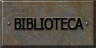
<style>
.page{position:relative;width:96px;height:48px}
.page>*{position:absolute;margin:0}
.t1{font:14.7px "Tahoma";letter-spacing:-0.05em;color:#000000;text-transform:uppercase;font-weight:bold;scale:0.9 1}
</style>
<div class="page">
<p class="t1" style="left:14px;top:18px;width:70px;height:12px">biblioteca</p>
</div>
